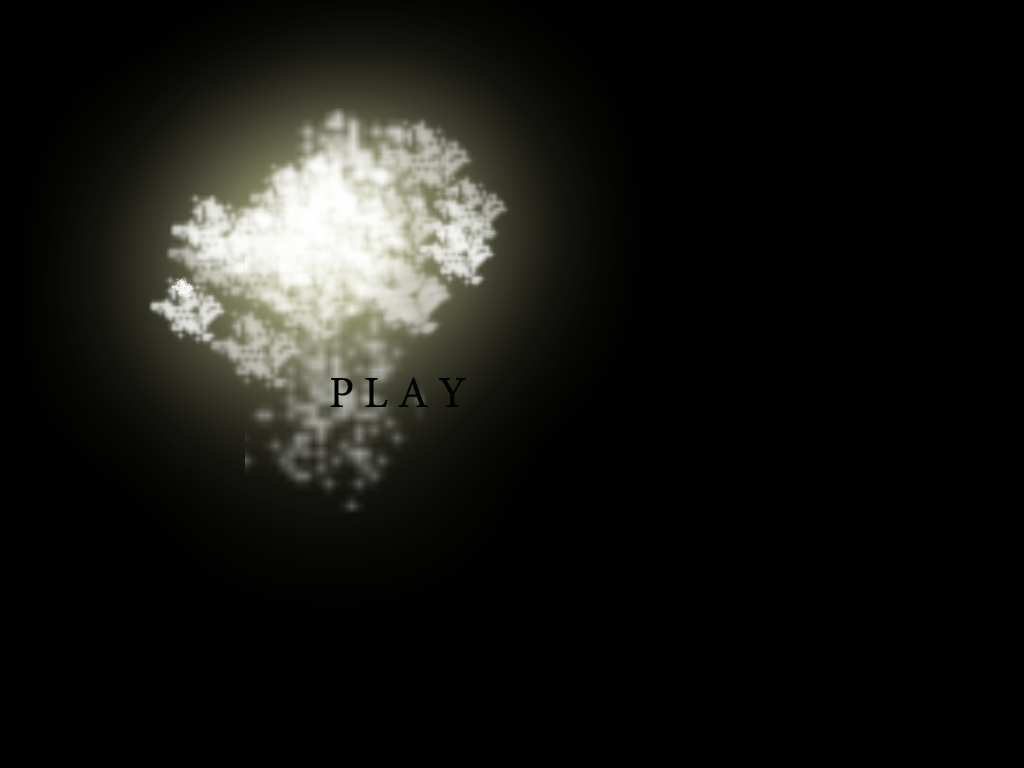
<style>
.page{position:relative;width:1024px;height:768px;background:#000000}
.page>*{position:absolute;margin:0}
.t1{font:44.2px "MinionPro-Regular";color:#020202}
</style>
<div class="page">
<p class="t1" style="left:330px;top:377px;width:136px;height:30px">P L A Y</p>
</div>
